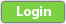
<style>
.page{position:relative;width:66px;height:24px;background:#7cd143}
.page>*{position:absolute;margin:0}
.t1{font:14px "MyriadPro-Bold";color:#ffffff}
</style>
<div class="page">
<p class="t1" style="left:17px;top:6px;width:34px;height:13px">Login</p>
</div>
